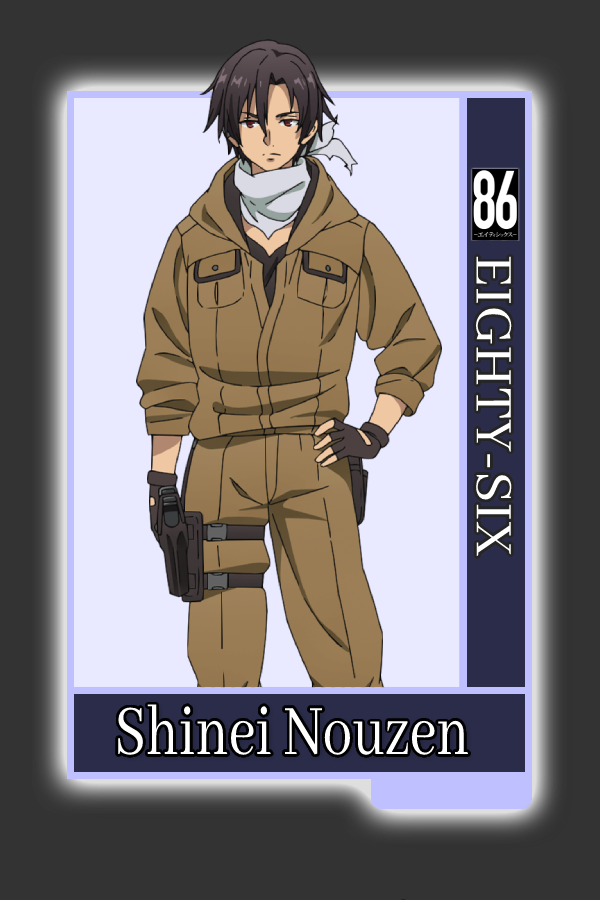
<style>
.page{position:relative;width:600px;height:900px;background:#333333}
.page>*{position:absolute;margin:0}
.t1{font:58.2px "AbhayaLibre-Regular";color:#ffffff}
.t2{font:78.1px "AbhayaLibre-Regular";color:#ffffff;scale:0.76 1}
</style>
<div class="page">
<p class="t1" style="left:476px;top:256px;width:36px;height:300px;rotate:90deg">EIGHTY-SIX</p>
<p class="t2" style="left:118px;top:704px;width:351px;height:51px">Shinei Nouzen</p>
</div>
